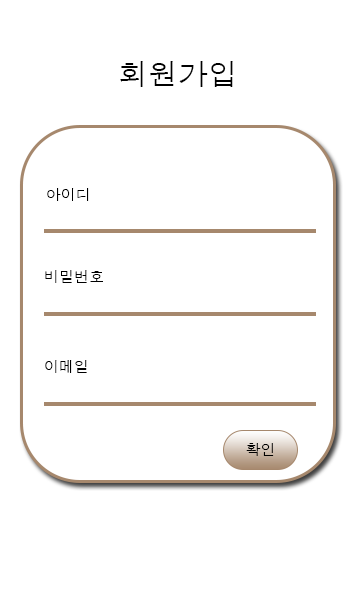
<style>
.page{position:relative;width:360px;height:600px;background:#ffffff}
.page>*{position:absolute;margin:0}
.t1{font:29.7px "Dotum";color:#000000}
.t2{font:15px "Dotum";color:#000000}
.t3{font:14.9px "Dotum";color:#000000}
</style>
<div class="page">
<p class="t1" style="left:120px;top:61px;width:113px;height:26px">회원가입</p>
<p class="t2" style="left:47px;top:188px;width:42px;height:13px">아이디</p>
<p class="t3" style="left:45px;top:270px;width:58px;height:13px">비밀번호</p>
<p class="t3" style="left:45px;top:360px;width:42px;height:13px">이메일</p>
<p class="t2" style="left:246px;top:443px;width:28px;height:13px">확인</p>
</div>
